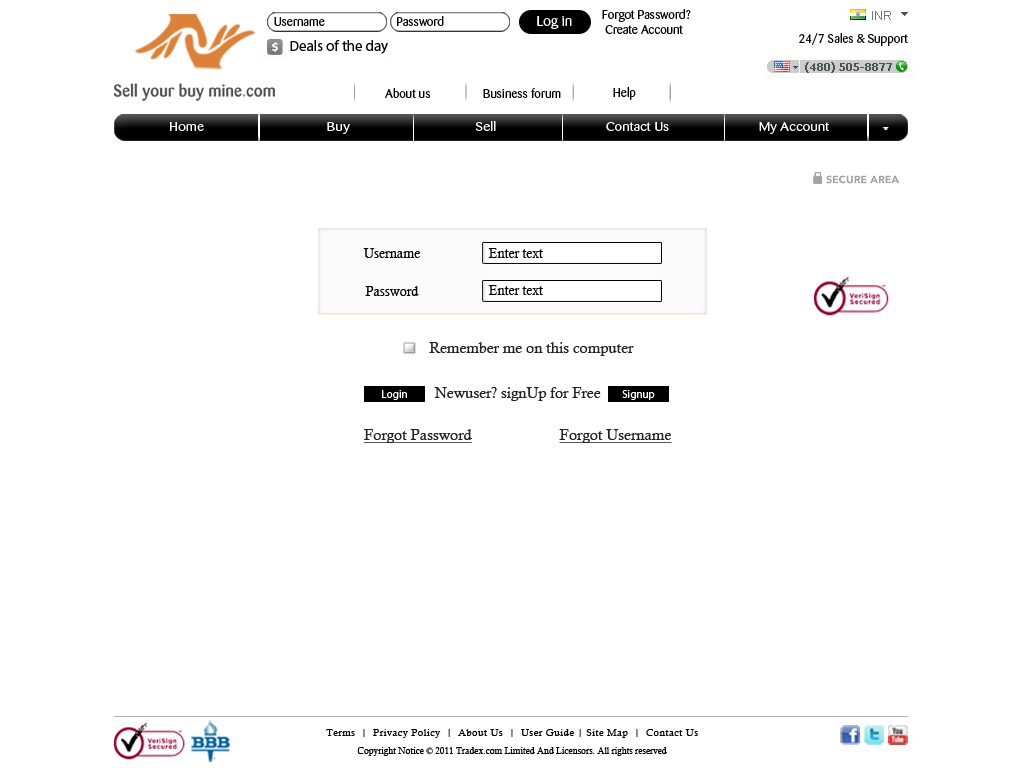
<style>
.page{position:relative;width:1024px;height:768px;background:#ffffff}
.page>*{position:absolute;margin:0}
.t1{font:12px "Barmeno-Regular";color:#000000;scale:1.05 1}
.t2{font:14px "Barmeno-Regular";color:#ffffff;scale:1.05 1}
.t3{font:14.9px "MyriadPro-Regular";color:#000000}
.t4{font:12px "Barmeno-Regular";color:#030303;scale:1.05 1}
.t5{font:12.1px "Barmeno-Regular";color:#ffffff;scale:1.2 1}
.t6{font:13px "CalistoMT";color:#010101}
.t7{font:15px "CalistoMT";color:#222222}
.t8{font:11px "MyriadPro-Regular";color:#ffffff}
.t9{font:15px "CalistoMT";color:#222222;text-decoration:underline}
.t10{font:10px/18px "CalistoMT";letter-spacing:0.045em;color:#000000}
.t11{font:9px/18px "CalistoMT";color:#000000}
</style>
<div class="page">
<p class="t1" style="left:274px;top:17px;width:51px;height:9px">Username</p>
<p class="t1" style="left:397px;top:16px;width:47px;height:10px">Password</p>
<p class="t2" style="left:537px;top:16px;width:35px;height:13px">Log in</p>
<p class="t1" style="left:602px;top:9px;width:89px;height:25px">Forgot Password? <br> Create Account</p>
<p class="t3" style="left:290px;top:40px;width:98px;height:14px">Deals of the day</p>
<p class="t4" style="left:799px;top:33px;width:109px;height:13px">24/7 Sales &amp; Support</p>
<p class="t1" style="left:385px;top:88px;width:45px;height:10px">About us</p>
<p class="t1" style="left:483px;top:88px;width:78px;height:10px">Business forum</p>
<p class="t1" style="left:613px;top:87px;width:23px;height:13px">Help</p>
<p class="t5" style="left:170px;top:121px;width:660px;height:13px">Home                                     Buy                                      Sell                                 Contact Us                           My Account</p>
<p class="t6" style="left:363px;top:248px;width:57px;height:10px">Username</p>
<p class="t6" style="left:488px;top:248px;width:55px;height:10px">Enter text</p>
<p class="t6" style="left:365px;top:286px;width:54px;height:10px">Password</p>
<p class="t6" style="left:488px;top:285px;width:55px;height:10px">Enter text</p>
<p class="t7" style="left:429px;top:342px;width:205px;height:14px">Remember me on this computer</p>
<p class="t8" style="left:382px;top:390px;width:25px;height:10px">Login</p>
<p class="t7" style="left:434px;top:387px;width:167px;height:14px">Newuser? signUp for Free</p>
<p class="t8" style="left:622px;top:390px;width:33px;height:10px">Signup</p>
<p class="t9" style="left:363px;top:429px;width:309px;height:14px">Forgot Password                       Forgot Username</p>
<p class="t10" style="left:326px;top:729px;width:372px;height:27px;text-align:center">Terms  |  Privacy Policy  |  About Us  |  User Guide | Site Map  |  Contact Us<br><span class="t11">Copyright Notice © 2011 Tradex.com Limited And Licensors. All rights reserved</span></p>
</div>
